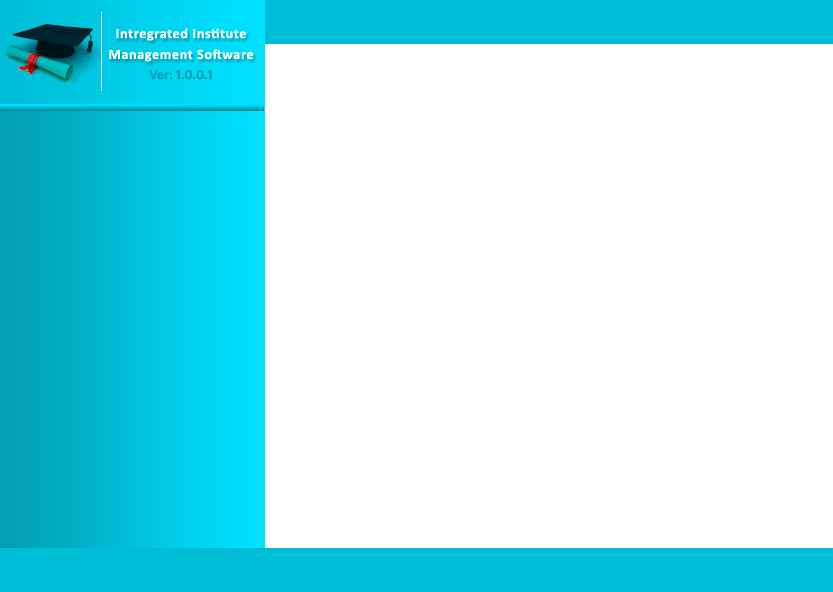
<style>
.page{position:relative;width:833px;height:592px;background:#ffffff}
.page>*{position:absolute;margin:0}
.t1{font:14px/20.9px "Calibri-Bold";letter-spacing:0.05em;color:#ffffff}
.t2{font:14px "Calibri-Bold";color:#02a0b5}
</style>
<div class="page">
<p class="t1" style="left:109px;top:28px;width:144px;height:34px;text-align:center">Intregrated Institute <br>Management Software</p>
<p class="t2" style="left:149px;top:70px;width:63px;height:10px">Ver: 1.0.0.1</p>
</div>
